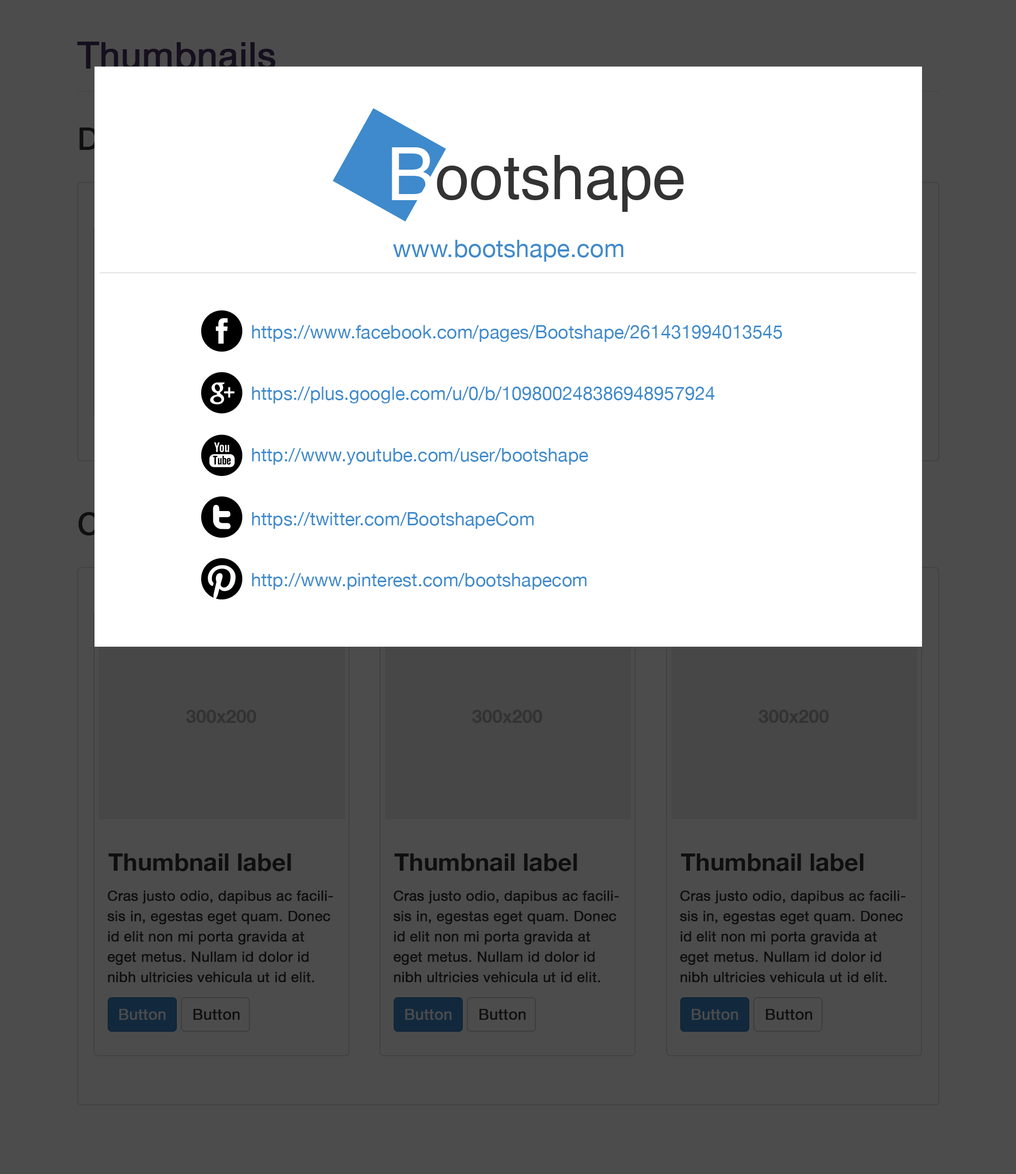
<style>
.page{position:relative;width:1016px;height:1174px;background:#4c4c4c}
.page>*{position:absolute;margin:0}
.t1{font:36.6px "HelveticaNeue";color:#150f1e;font-weight:bold}
.t2{font:24.4px "HelveticaNeue";color:#3e8acc}
.t3{font:18.3px "HelveticaNeue";color:#3e8acc}
.t4{font:18.3px "HelveticaNeue-Bold";color:#333333}
.t5{font:24.4px "HelveticaNeue-Bold";color:#0f0f0f}
.t6{font:14.2px/20.3px "HelveticaNeue";color:#0f0f0f;font-weight:bold}
.t7{font:15.2px "HelveticaNeue";color:#4c4c4c;font-weight:bold}
.t8{font:15.2px "HelveticaNeue";color:#0f0f0f;font-weight:bold}
</style>
<div class="page">
<p class="t1" style="left:77px;top:42px;width:198px;height:27px">Thumbnails</p>
<p class="t2" style="left:393px;top:240px;width:230px;height:22px">www.bootshape.com</p>
<p class="t3" style="left:252px;top:325px;width:530px;height:17px">https://www.facebook.com/pages/Bootshape/261431994013545</p>
<p class="t3" style="left:252px;top:387px;width:463px;height:16px">https://plus.google.com/u/0/b/109800248386948957924</p>
<p class="t3" style="left:252px;top:448px;width:336px;height:17px">http://www.youtube.com/user/bootshape</p>
<p class="t3" style="left:252px;top:512px;width:282px;height:17px">https://twitter.com/BootshapeCom</p>
<p class="t3" style="left:252px;top:573px;width:335px;height:17px">http://www.pinterest.com/bootshapecom</p>
<p class="t4" style="left:186px;top:710px;width:71px;height:13px">300x200</p>
<p class="t4" style="left:472px;top:710px;width:70px;height:13px">300x200</p>
<p class="t4" style="left:758px;top:710px;width:71px;height:13px">300x200</p>
<p class="t5" style="left:108px;top:853px;width:183px;height:18px">Thumbnail label</p>
<p class="t5" style="left:394px;top:853px;width:183px;height:18px">Thumbnail label</p>
<p class="t5" style="left:681px;top:853px;width:182px;height:18px">Thumbnail label</p>
<p class="t6" style="left:107px;top:890px;width:226px;height:92px;text-align:right">Cras justo odio, dapibus ac facilisis in, egestas eget quam. Donec id elit non mi porta gravida at eget metus. Nullam id dolor id nibh ultricies vehicula ut id elit.</p>
<p class="t6" style="left:393px;top:890px;width:226px;height:92px;text-align:right">Cras justo odio, dapibus ac facilisis in, egestas eget quam. Donec id elit non mi porta gravida at eget metus. Nullam id dolor id nibh ultricies vehicula ut id elit.</p>
<p class="t6" style="left:680px;top:890px;width:226px;height:92px;text-align:right">Cras justo odio, dapibus ac facilisis in, egestas eget quam. Donec id elit non mi porta gravida at eget metus. Nullam id dolor id nibh ultricies vehicula ut id elit.</p>
<p class="t7" style="left:119px;top:1009px;width:47px;height:11px">Button</p>
<p class="t8" style="left:193px;top:1009px;width:47px;height:11px">Button</p>
<p class="t7" style="left:405px;top:1009px;width:47px;height:11px">Button</p>
<p class="t8" style="left:479px;top:1009px;width:47px;height:11px">Button</p>
<p class="t7" style="left:691px;top:1009px;width:47px;height:11px">Button</p>
<p class="t8" style="left:765px;top:1009px;width:47px;height:11px">Button</p>
</div>
